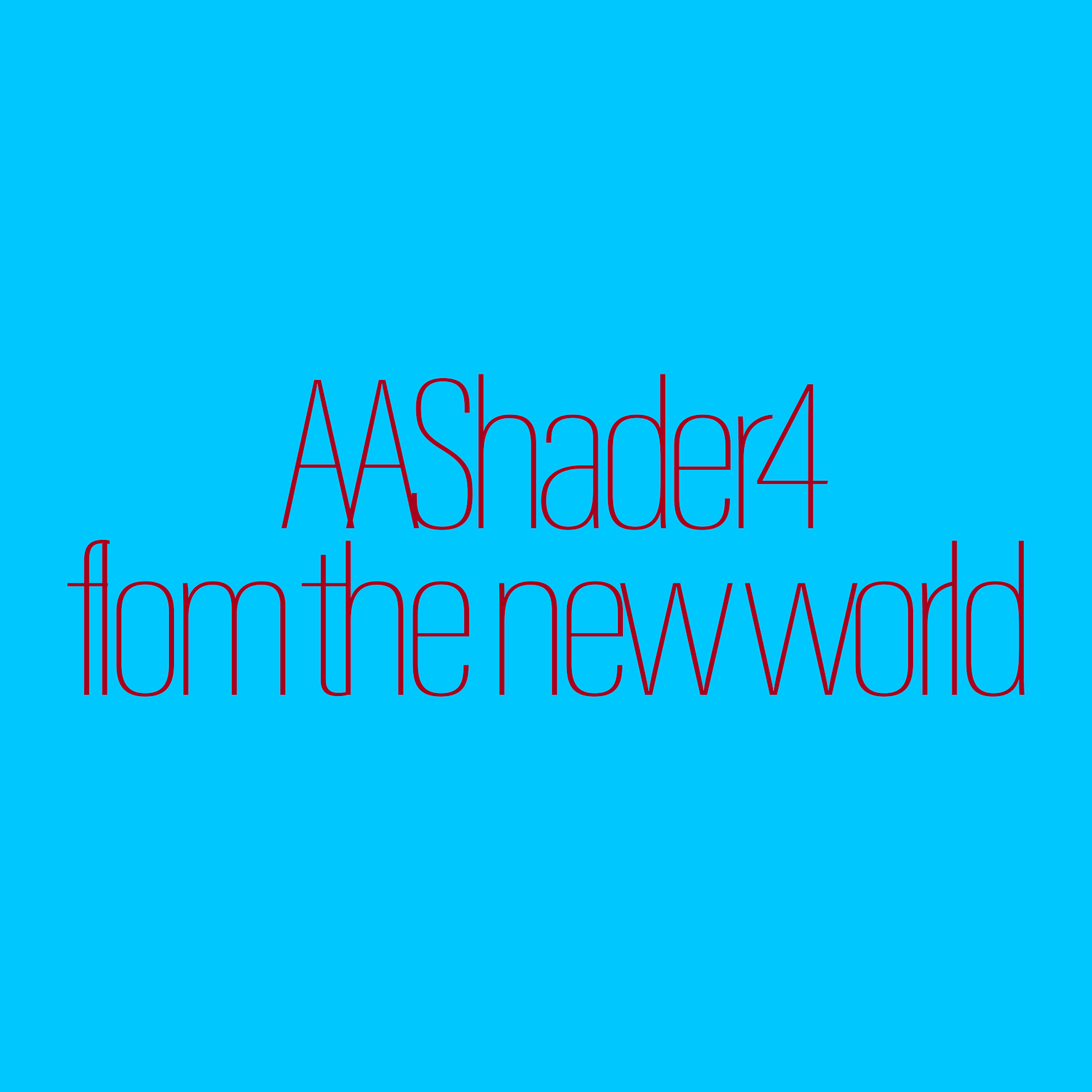
<style>
.page{position:relative;width:1092px;height:1092px;background:#00c8ff}
.page>*{position:absolute;margin:0}
.t1{font:222.7px/167px "AcuminConcept-ExtraCondensedThin";letter-spacing:-0.065em;color:#a7001c;scale:1.34 1}
</style>
<div class="page">
<p class="t1" style="left:67px;top:374px;width:957px;height:323px;text-align:center">AAShader4<br>flom the new world</p>
</div>
